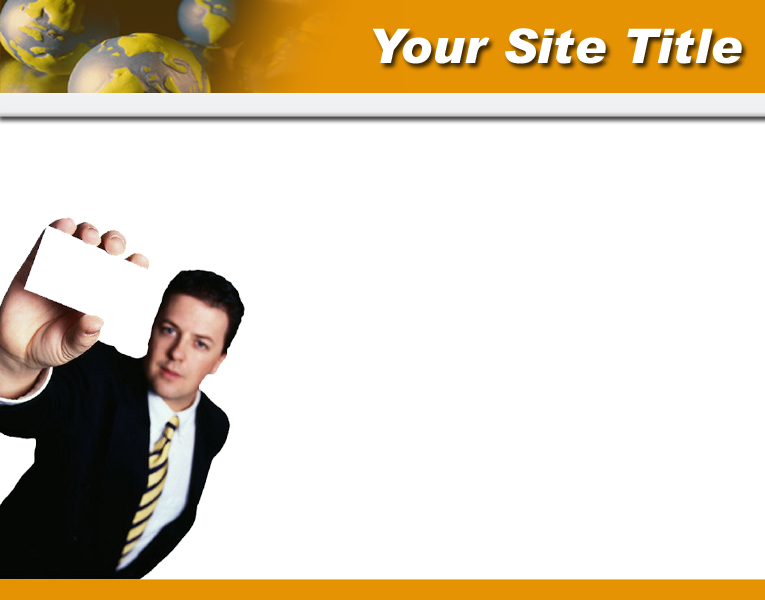
<style>
.page{position:relative;width:765px;height:600px;background:#ffffff}
.page>*{position:absolute;margin:0}
.t1{font:48px "Arial-BlackItalic";color:#ffffff}
</style>
<div class="page">
<p class="t1" style="left:372px;top:28px;width:370px;height:36px">Your Site Title</p>
</div>
